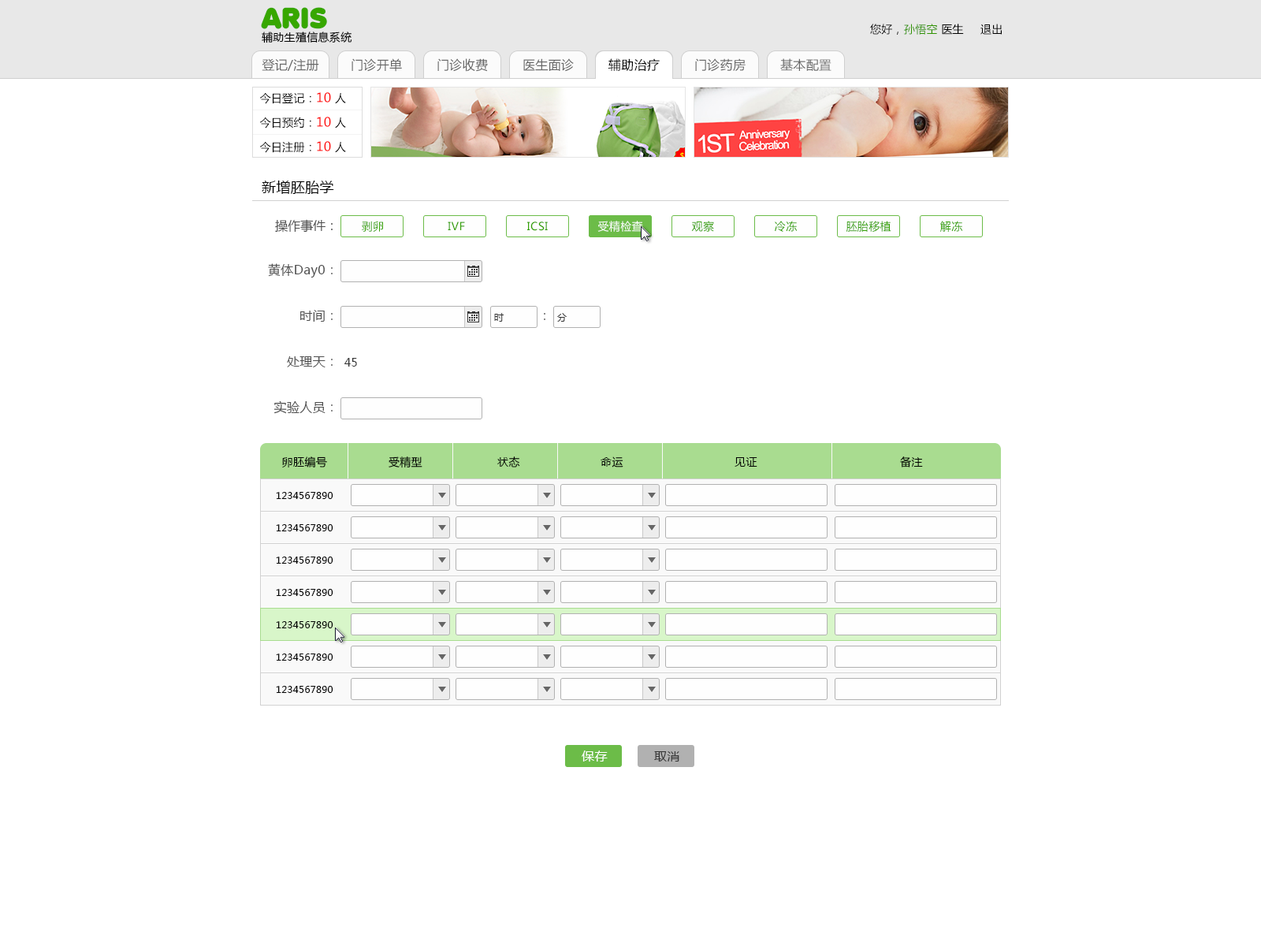
<style>
.page{position:relative;width:1261px;height:946px;background:#ffffff}
.page>*{position:absolute;margin:0}
.t1{font:14.2px "MicrosoftYaHei";letter-spacing:0.022em;color:#000000}
.t2{font:12.6px "MicrosoftYaHei";color:#4f4f4f}
.t3{font:11px "MicrosoftYaHei";letter-spacing:0.022em;color:#32a000}
.t4{font:11px "MicrosoftYaHei";letter-spacing:0.022em;color:#ffffff}
.t5{font:12.6px "MicrosoftYaHei";letter-spacing:0.022em;color:#4f4f4f}
.t6{font:12.6px "MicrosoftYaHei";color:#666666}
.t7{font:9.5px "MicrosoftYaHei";letter-spacing:0.022em;color:#333333}
.t8{font:12.6px "MicrosoftYaHei"}
.t9{font:11px "MicrosoftYaHei";letter-spacing:0.022em;color:#333333}
.t10{font:11px "MicrosoftYaHei";letter-spacing:0.022em;color:#000000}
.t11{font:9.5px "MicrosoftYaHei";letter-spacing:0.022em;color:#000000}
.t12{font:12.6px "MicrosoftYaHei";letter-spacing:0.022em;color:#ffffff}
.t13{font:12.6px "MicrosoftYaHei";letter-spacing:0.022em;color:#333333}
</style>
<div class="page">
<p class="t1" style="left:262px;top:180px;width:72px;height:14px">新增胚胎学</p>
<p class="t2" style="left:275px;top:219px;width:58px;height:13px">操作事件：</p>
<p class="t3" style="left:362px;top:221px;width:21px;height:11px">剥卵</p>
<p class="t3" style="left:448px;top:221px;width:17px;height:9px">IVF</p>
<p class="t3" style="left:527px;top:221px;width:21px;height:10px">ICSI</p>
<p class="t4" style="left:597px;top:221px;width:46px;height:11px">受精检查</p>
<p class="t4" style="left:597px;top:221px;width:46px;height:11px">受精检查</p>
<p class="t3" style="left:691px;top:221px;width:23px;height:11px">观察</p>
<p class="t3" style="left:775px;top:221px;width:23px;height:11px">冷冻</p>
<p class="t3" style="left:846px;top:221px;width:45px;height:11px">胚胎移植</p>
<p class="t3" style="left:940px;top:221px;width:23px;height:11px">解冻</p>
<p class="t5" style="left:268px;top:263px;width:65px;height:14px">黄体Day0<span class="t6">：</span></p>
<p class="t5" style="left:300px;top:310px;width:33px;height:12px">时间<span class="t6">：</span></p>
<p class="t7" style="left:494px;top:313px;width:10px;height:9px">时</p>
<p class="t8" style="left:544px;top:313px;width:1px;height:7px">：</p>
<p class="t7" style="left:557px;top:313px;width:10px;height:9px">分</p>
<p class="t5" style="left:287px;top:356px;width:46px;height:11px">处理天<span class="t6">：</span></p>
<p class="t9" style="left:344px;top:358px;width:13px;height:8px">45</p>
<p class="t5" style="left:273px;top:400px;width:60px;height:14px">实验人员<span class="t6">：</span></p>
<p class="t10" style="left:282px;top:456px;width:45px;height:11px">卵胚编号</p>
<p class="t10" style="left:389px;top:456px;width:33px;height:12px">受精型</p>
<p class="t10" style="left:497px;top:456px;width:23px;height:11px">状态</p>
<p class="t10" style="left:601px;top:456px;width:22px;height:11px">命运</p>
<p class="t10" style="left:734px;top:457px;width:23px;height:10px">见证</p>
<p class="t10" style="left:900px;top:456px;width:23px;height:11px">备注</p>
<p class="t11" style="left:276px;top:492px;width:57px;height:7px">1234567890</p>
<p class="t11" style="left:276px;top:524px;width:57px;height:7px">1234567890</p>
<p class="t11" style="left:276px;top:556px;width:57px;height:7px">1234567890</p>
<p class="t11" style="left:276px;top:589px;width:57px;height:7px">1234567890</p>
<p class="t11" style="left:276px;top:621px;width:57px;height:7px">1234567890</p>
<p class="t11" style="left:276px;top:653px;width:57px;height:7px">1234567890</p>
<p class="t11" style="left:276px;top:686px;width:57px;height:7px">1234567890</p>
<p class="t12" style="left:582px;top:750px;width:26px;height:11px">保存</p>
<p class="t13" style="left:654px;top:751px;width:25px;height:10px">取消</p>
</div>
